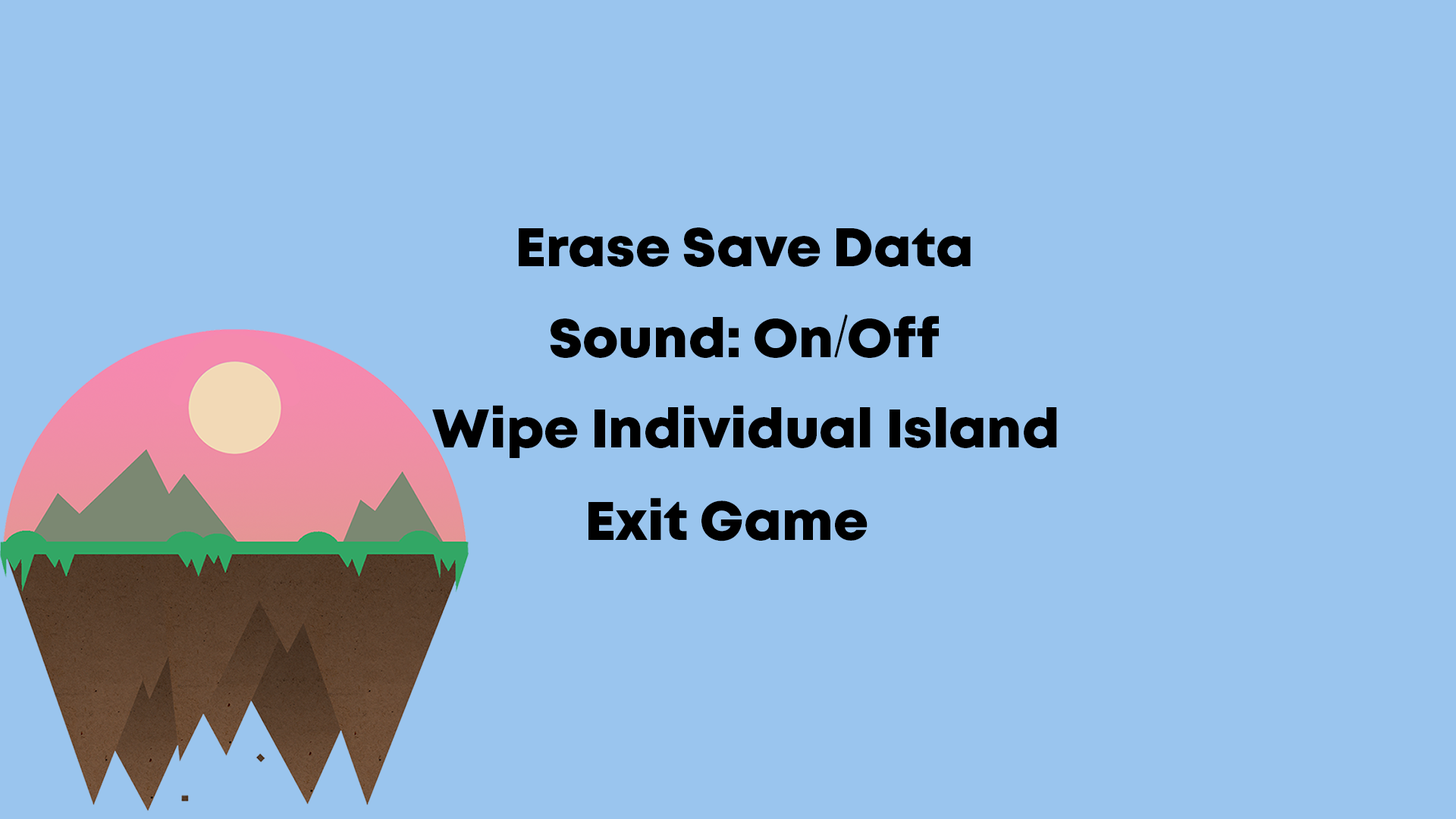
<style>
.page{position:relative;width:1456px;height:819px;background:#9ac5ee}
.page>*{position:absolute;margin:0}
.t1{font:54.6px "Mont-HeavyDEMO";color:#000000}
.t2{font:54.6px "MesquiteStd";color:#000000}
</style>
<div class="page">
<p class="t1" style="left:519px;top:227px;width:452px;height:40px">Erase Save Data</p>
<p class="t1" style="left:550px;top:314px;width:389px;height:44px">Sound: On<span class="t2">/</span>Off</p>
<p class="t1" style="left:432px;top:405px;width:625px;height:53px">Wipe Individual Island</p>
<p class="t1" style="left:588px;top:497px;width:280px;height:44px">Exit Game</p>
</div>
